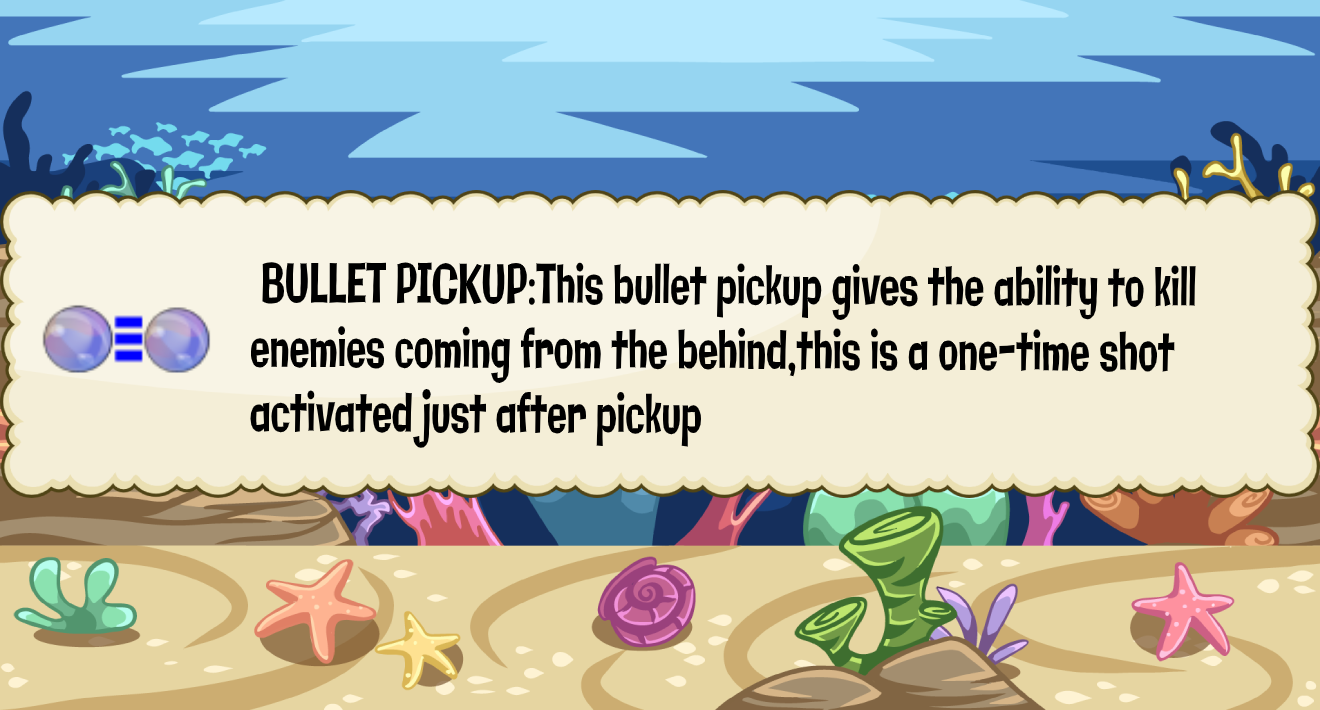
<style>
.page{position:relative;width:1320px;height:710px;background:#f4eed7}
.page>*{position:absolute;margin:0}
.t1{font:53.8px "Galindo-Regular";color:#000000;scale:0.6 1}
.t2{font:57.3px "Galindo-Regular";color:#000000;scale:0.6 1}
</style>
<div class="page">
<p class="t1" style="left:250px;top:262px;width:946px;height:186px"><span class="t2"> </span>BULLET PICKUP:This bullet pickup gives the ability to kill <br>enemies coming from the behind,this is a one-time shot <br>activated just after pickup</p>
</div>
